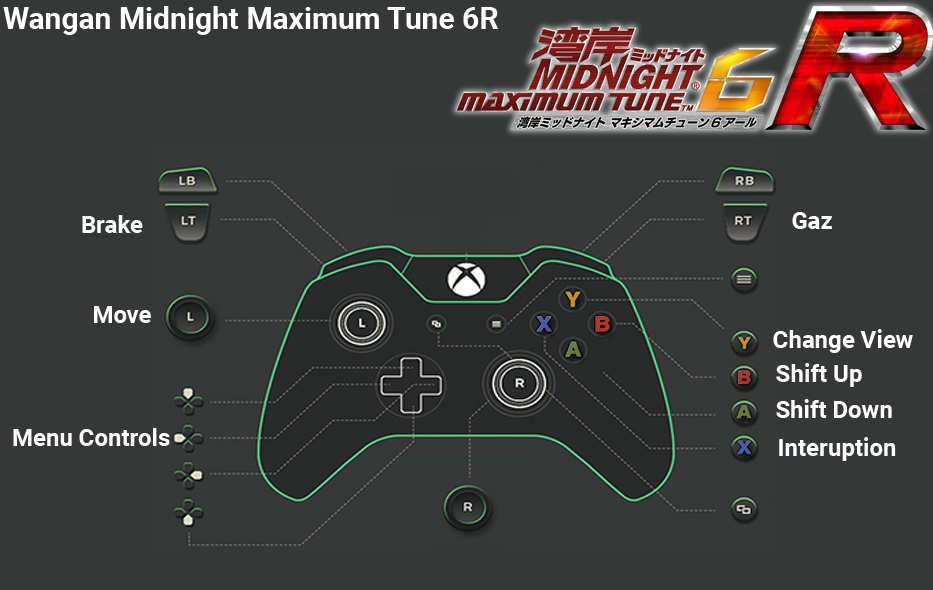
<style>
.page{position:relative;width:933px;height:590px;background:#363838}
.page>*{position:absolute;margin:0}
.t1{font:30px "Roboto-Bold";color:#ffffff}
.t2{font:24px "Roboto-Bold";color:#ffffff}
</style>
<div class="page">
<p class="t1" style="left:3px;top:6px;width:495px;height:29px">Wangan Midnight Maximum Tune 6R</p>
<p class="t2" style="left:82px;top:215px;width:61px;height:18px">Brake</p>
<p class="t2" style="left:792px;top:212px;width:40px;height:17px">Gaz</p>
<p class="t2" style="left:94px;top:306px;width:57px;height:17px">Move</p>
<p class="t2" style="left:773px;top:329px;width:140px;height:24px">Change View</p>
<p class="t2" style="left:776px;top:363px;width:86px;height:24px">Shift Up</p>
<p class="t2" style="left:776px;top:399px;width:116px;height:19px">Shift Down</p>
<p class="t2" style="left:13px;top:428px;width:157px;height:18px">Menu Controls</p>
<p class="t2" style="left:779px;top:437px;width:117px;height:24px">Interuption</p>
</div>
